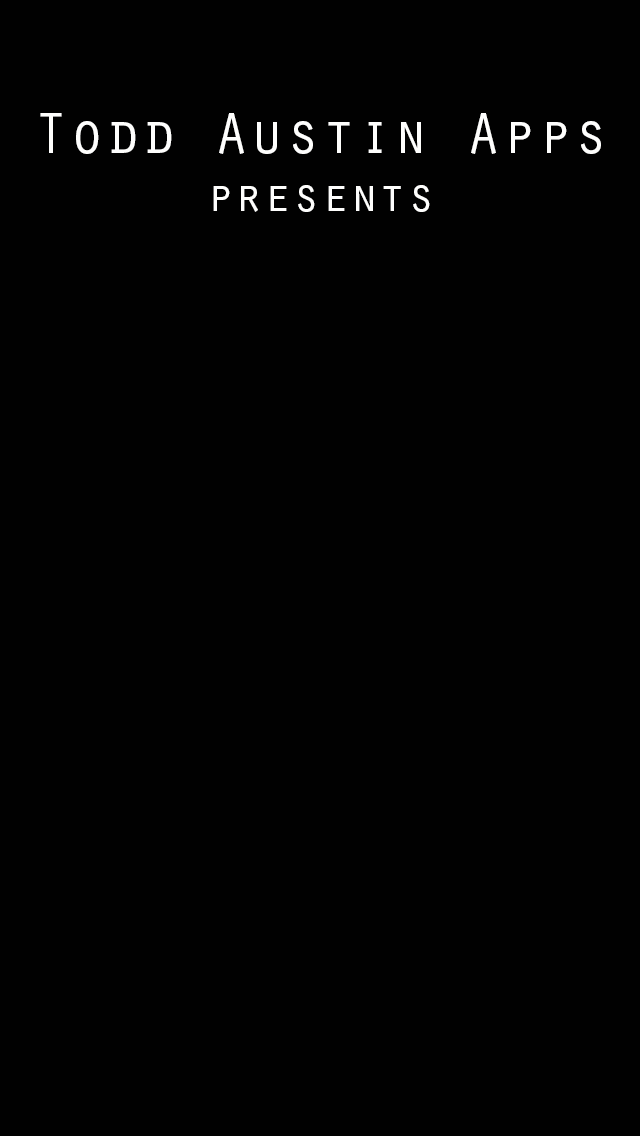
<style>
.page{position:relative;width:640px;height:1136px;background:#010101}
.page>*{position:absolute;margin:0}
.t1{font:60px "OratorStd";color:#fefefd}
.t2{font:48px "OratorStd";color:#fefefd}
</style>
<div class="page">
<p class="t1" style="left:40px;top:113px;width:561px;height:99px;text-align:center">Todd Austin Apps<br><span class="t2">presents</span></p>
</div>
